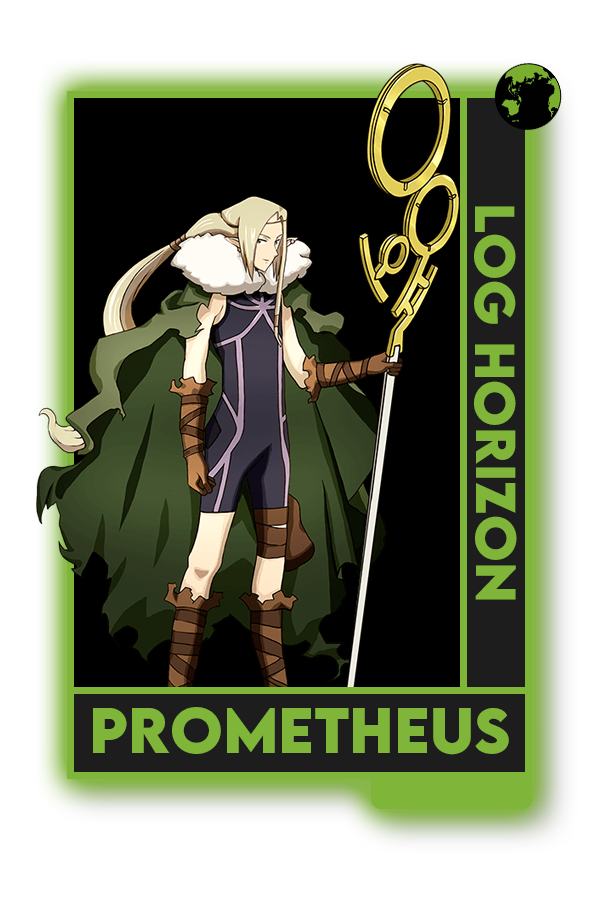
<style>
.page{position:relative;width:600px;height:900px;background:#ffffff}
.page>*{position:absolute;margin:0}
.t1{font:50px "LEMONMILK-Bold";color:#7fad41}
.t2{font:56.7px "LEMONMILK-Bold";color:#7fad41}
</style>
<div class="page">
<p class="t1" style="left:474px;top:206px;width:43px;height:394px;rotate:90deg">Log Horizon</p>
<p class="t2" style="left:93px;top:707px;width:416px;height:48px">Prometheus</p>
</div>
